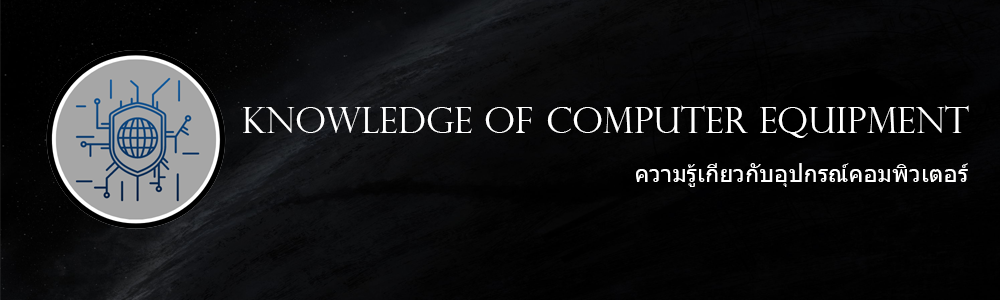
<style>
.page{position:relative;width:1000px;height:300px}
.page>*{position:absolute;margin:0}
.t1{font:36px "PerpetuaTitlingMT-Light";color:#ffffff}
.t2{font:24px "Tahoma";color:#ffffff}
</style>
<div class="page">
<p class="t1" style="left:243px;top:105px;width:726px;height:33px">knowledge of computer equipment</p>
<p class="t2" style="left:636px;top:163px;width:332px;height:24px">ความรู้เกี่ยวกับอุปกรณ์คอมพิวเตอร์</p>
</div>
